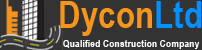
<style>
.page{position:relative;width:202px;height:50px;background:#333333}
.page>*{position:absolute;margin:0}
.t1{font:37.5px "ArialNarrow-Bold";letter-spacing:0.01em;color:#f7941a}
.t2{font:37.5px "ArialNarrow-Bold";letter-spacing:0.01em;color:#0090ff}
.t3{font:10.4px "ArialNarrow-Bold";letter-spacing:0.01em;color:#ffffff}
</style>
<div class="page">
<p class="t1" style="left:60px;top:1px;width:142px;height:35px">Dycon<span class="t2">Ltd</span></p>
<p class="t3" style="left:63px;top:40px;width:137px;height:9px">Qualified Construction Company</p>
</div>
